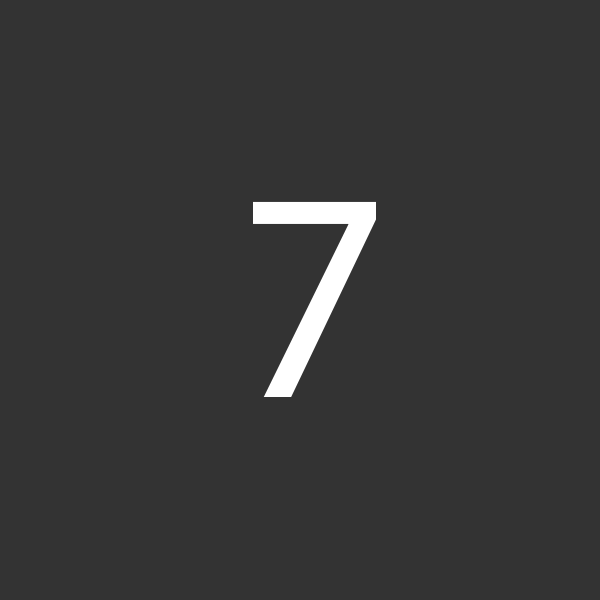
<style>
.page{position:relative;width:600px;height:600px;background:#333333}
.page>*{position:absolute;margin:0}
.t1{font:300px "MyriadPro-Regular";color:#ffffff}
</style>
<div class="page">
<p class="t1" style="left:253px;top:201px;width:123px;height:196px">7</p>
</div>
